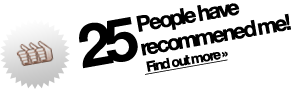
<style>
.page{position:relative;width:300px;height:89px;background:#ffffff}
.page>*{position:absolute;margin:0}
.t1{font:22px/24px "HelveticaNeue-Bold";letter-spacing:-0.11em;color:#000000}
.t2{font:14px "HelveticaNeue-Bold";letter-spacing:-0.11em;color:#000000;text-decoration:underline}
.t3{font:60px "HelveticaNeue-Bold";letter-spacing:-0.11em;color:#000000}
</style>
<div class="page">
<p class="t1" style="left:136px;top:3px;width:155px;height:72px;rotate:-10deg">People have<br>recommened me!<br><span class="t2"> Find out more »</span></p>
<p class="t3" style="left:79px;top:17px;width:59px;height:52px;rotate:-10deg">25</p>
</div>
